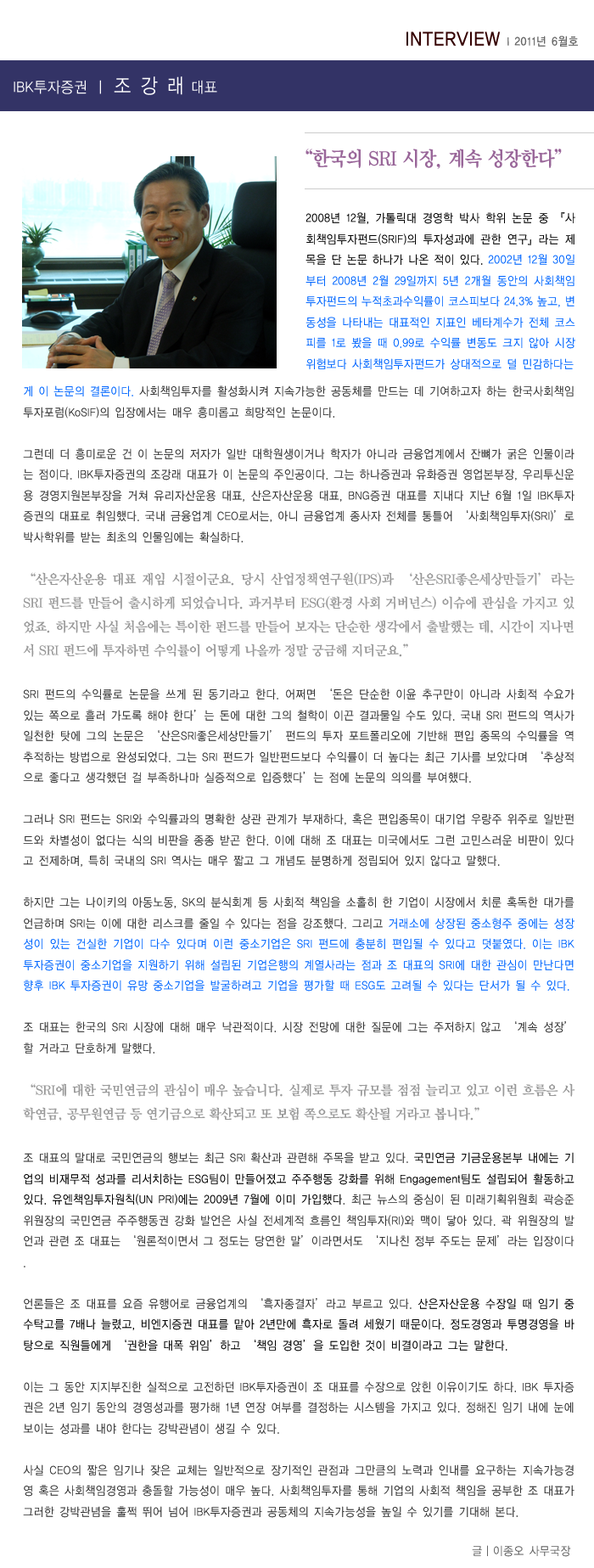
<style>
.page{position:relative;width:594px;height:1568px;background:#ffffff}
.page>*{position:absolute;margin:0}
.t1{font:11.9px "YDIYGO130-KSCpc-EUC-H";letter-spacing:-0.025em;color:#666666;scale:0.9 1}
.t2{font:20.4px "YDIYGO130-KSCpc-EUC-H";letter-spacing:-0.025em;color:#330000;scale:0.9 1}
.t3{font:15.3px "YDIYGO120-KSCpc-EUC-H";letter-spacing:-0.025em;color:#ffffff;scale:0.9 1}
.t4{font:20.4px "YDIYGO120-KSCpc-EUC-H";letter-spacing:-0.025em;color:#ffffff;scale:0.9 1}
.t5{font:20.4px "YDIYMjO150";letter-spacing:-0.025em;color:#996699;scale:0.9 1}
.t6{font:11.9px "YDIYGO120-KSCpc-EUC-H";letter-spacing:-0.03em;color:#0066ff;scale:0.9 1}
.t7{font:11.9px "YDIYGO120-KSCpc-EUC-H";letter-spacing:-0.03em;color:#000000;scale:0.9 1}
.t8{font:11.9px "YDIYGO120-KSCpc-EUC-H";letter-spacing:-0.025em;color:#333333;scale:0.9 1}
.t9{font:13.6px "YDIYMjO150";letter-spacing:-0.025em;color:#999999;scale:0.95 1}
.t10{font:11.9px "YDIYGO120-KSCpc-EUC-H";letter-spacing:-0.025em;color:#0066ff;scale:0.9 1}
.t11{font:11.9px "YDIYGO120-KSCpc-EUC-H";letter-spacing:-0.025em;color:#000000;scale:0.9 1}
.t12{font:11.1px "YDIYGO120-KSCpc-EUC-H";letter-spacing:-0.025em;color:#666666;scale:0.9 1}
</style>
<div class="page">
<p class="t1" style="left:407px;top:31px;width:171px;height:16px"><span class="t2">INTERVIEW </span>l 2011년 6월호</p>
<p class="t3" style="left:14px;top:76px;width:203px;height:19px">IBK투자증권 ㅣ <span class="t4">조 강 래</span> 대표</p>
<p class="t5" style="left:306px;top:149px;width:256px;height:20px">“한국의 SRI 시장, 계속 성장한다”</p>
<p class="t6" style="left:306px;top:212px;width:270px;height:158px;text-align:justify"><span class="t7">2008년 12월, 가톨릭대 경영학 박사 학위 논문 중 『사회책임투자펀드(SRIF)의 투자성과에 관한 연구』라는 제목을 단 논문 하나가 나온 적이 있다. </span>2002년 12월 30일부터 2008년 2월 29일까지 5년 2개월 동안의 사회책임투자펀드의 누적초과수익률이 코스피보다 24.3% 높고, 변동성을 나타내는 대표적인 지표인 베타계수가 전체 코스피를 1로 봤을 때 0.99로 수익률 변동도 크지 않아 시장 위험보다 사회책임투자펀드가 상대적으로 덜 민감하다는</p>
<p class="t8" style="left:23px;top:385px;width:553px;height:1133px;text-align:justify"><span class="t6">게 이 논문의 결론이다. </span>사회책임투자를 활성화시켜 지속가능한 공동체를 만드는 데 기여하고자 하는 한국사회책임투자포럼(KoSIF)의 입장에서는 매우 흥미롭고 희망적인 논문이다. <br><br>그런데 더 흥미로운 건 이 논문의 저자가 일반 대학원생이거나 학자가 아니라 금융업계에서 잔뼈가 굵은 인물이라는 점이다. IBK투자증권의 조강래 대표가 이 논문의 주인공이다. 그는 하나증권과 유화증권 영업본부장, 우리투신운용 경영지원본부장을 거쳐 유리자산운용 대표, 산은자산운용 대표, BNG증권 대표를 지내다 지난 6월 1일 IBK투자증권의 대표로 취임했다. 국내 금융업계 CEO로서는, 아니 금융업계 종사자 전체를 통틀어 ‘사회책임투자(SRI)’로 박사학위를 받는 최초의 인물임에는 확실하다. <br><br><span class="t9">“산은자산운용 대표 재임 시절이군요. 당시 산업정책연구원(IPS)과 ‘산은SRI좋은세상만들기’라는 SRI 펀드를 만들어 출시하게 되었습니다. 과거부터 ESG(환경•사회•거버넌스) 이슈에 관심을 가지고 있었죠. 하지만 사실 처음에는 특이한 펀드를 만들어 보자는 단순한 생각에서 출발했는 데, 시간이 지나면서 SRI 펀드에 투자하면 수익률이 어떻게 나올까 정말 궁금해 지더군요.”<br></span><br>SRI 펀드의 수익률로 논문을 쓰게 된 동기라고 한다. 어쩌면 ‘돈은 단순한 이윤 추구만이 아니라 사회적 수요가 있는 쪽으로 흘러 가도록 해야 한다’는 돈에 대한 그의 철학이 이끈 결과물일 수도 있다. 국내 SRI 펀드의 역사가 일천한 탓에 그의 논문은 ‘산은SRI좋은세상만들기’ 펀드의 투자 포트폴리오에 기반해 편입 종목의 수익률을 역추적하는 방법으로 완성되었다. 그는 SRI 펀드가 일반펀드보다 수익률이 더 높다는 최근 기사를 보았다며 ‘추상적으로 좋다고 생각했던 걸 부족하나마 실증적으로 입증했다’는 점에 논문의 의의를 부여했다. <br><br>그러나 SRI 펀드는 SRI와 수익률과의 명확한 상관 관계가 부재하다, 혹은 편입종목이 대기업 우량주 위주로 일반펀드와 차별성이 없다는 식의 비판을 종종 받곤 한다. 이에 대해 조 대표는 미국에서도 그런 고민스러운 비판이 있다고 전제하며, 특히 국내의 SRI 역사는 매우 짧고 그 개념도 분명하게 정립되어 있지 않다고 말했다. <br><br>하지만 그는 나이키의 아동노동, SK의 분식회계 등 사회적 책임을 소홀히 한 기업이 시장에서 치룬 혹독한 대가를 언급하며 SRI는 이에 대한 리스크를 줄일 수 있다는 점을 강조했다. 그리고 <span class="t10">거래소에 상장된 중소형주 중에는 성장성이 있는 건실한 기업이 다수 있다며 이런 중소기업은 SRI 펀드에 충분히 편입될 수 있다고 덧붙였다. 이는 IBK 투자증권이 중소기업을 지원하기 위해 설립된 기업은행의 계열사라는 점과 조 대표의 SRI에 대한 관심이 만난다면 향후 IBK 투자증권이 유망 중소기업을 발굴하려고 기업을 평가할 때 ESG도 고려될 수 있다는 단서가 될 수 있다. <br><br></span>조 대표는 한국의 SRI 시장에 대해 매우 낙관적이다. 시장 전망에 대한 질문에 그는 주저하지 않고 ‘계속 성장’할 거라고 단호하게 말했다.<br><br><span class="t9">“SRI에 대한 국민연금의 관심이 매우 높습니다. 실제로 투자 규모를 점점 늘리고 있고 이런 흐름은 사학연금, 공무원연금 등 연기금으로 확산되고 또 보험 쪽으로도 확산될 거라고 봅니다.”  <br></span><br>조 대표의 말대로 국민연금의 행보는 최근 SRI 확산과 관련해 주목을 받고 있다. <span class="t11">국민연금 기금운용본부 내에는 기업의 비재무적 성과를 리서치하는 ESG팀이 만들어졌고 주주행동 강화를 위해 Engagement팀도 설립되어 활동하고 있다. 유엔책임투자원칙(UN PRI)에는 2009년 7월에 이미 가입했다</span>. 최근 뉴스의 중심이 된 미래기획위원회 곽승준 위원장의 국민연금 주주행동권 강화 발언은 사실 전세계적 흐름인 책임투자(RI)와 맥이 닿아 있다. 곽 위원장의 발언과 관련 조 대표는 ‘원론적이면서 그 정도는 당연한 말’이라면서도 ‘지나친 정부 주도는 문제’라는 입장이다.<br><br>언론들은 조 대표를 요즘 유행어로 금융업계의 ‘흑자종결자’라고 부르고 있다. <span class="t11">산은자산운용 수장일 때 임기 중 수탁고를 7배나 늘렸고, 비엔지증권 대표를 맡아 2년만에 흑자로 돌려 세웠기 때문이다. 정도경영과 투명경영을 바탕으로 직원들에게 ‘권한을 대폭 위임’하고 ‘책임 경영’을 도입한 것이 비결이라고 그는 말한다. <br><br></span>이는 그 동안 지지부진한 실적으로 고전하던 IBK투자증권이 조 대표를 수장으로 앉힌 이유이기도 하다. IBK 투자증권은 2년 임기 동안의 경영성과를 평가해 1년 연장 여부를 결정하는 시스템을 가지고 있다. 정해진 임기 내에 눈에 보이는 성과를 내야 한다는 강박관념이 생길 수 있다.<br> <br>사실 CEO의 짧은 임기나 잦은 교체는 일반적으로 장기적인 관점과 그만큼의 노력과 인내를 요구하는 지속가능경영 혹은 사회책임경영과 충돌할 가능성이 매우 높다. 사회책임투자를 통해 기업의 사회적 책임을 공부한 조 대표가 그러한 강박관념을 훌쩍 뛰어 넘어 IBK투자증권과 공동체의 지속가능성을 높일 수 있기를 기대해 본다.</p>
<p class="t12" style="left:472px;top:1545px;width:99px;height:12px">글ㅣ이종오 사무국장</p>
</div>
